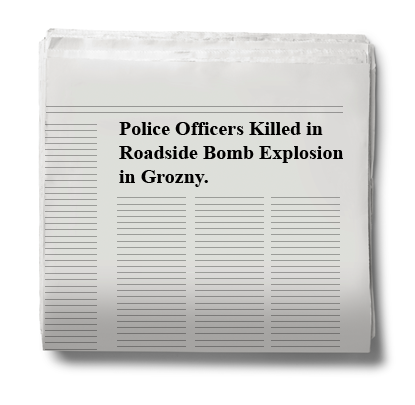
<style>
.page{position:relative;width:415px;height:405px;background:#ffffff}
.page>*{position:absolute;margin:0}
.t1{font:20px "TimesNewRomanPS-BoldMT";color:#010000}
</style>
<div class="page">
<p class="t1" style="left:119px;top:122px;width:224px;height:65px">Police Officers Killed in <br>Roadside Bomb Explosion <br>in Grozny.</p>
</div>
